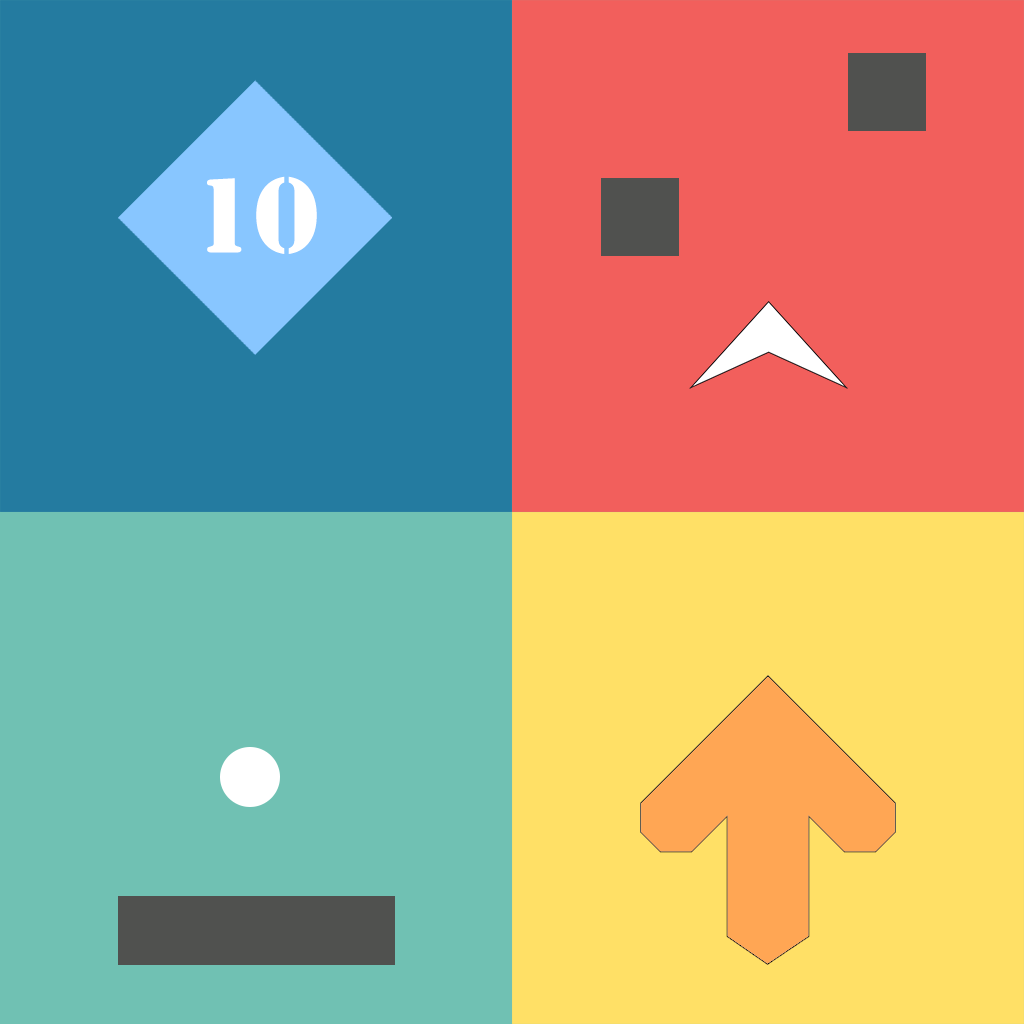
<style>
.page{position:relative;width:1024px;height:1024px;background:#f25f5c}
.page>*{position:absolute;margin:0}
.t1{font:99.3px "StencilStd";color:#ffffff}
</style>
<div class="page">
<p class="t1" style="left:207px;top:176px;width:110px;height:78px">10</p>
</div>
